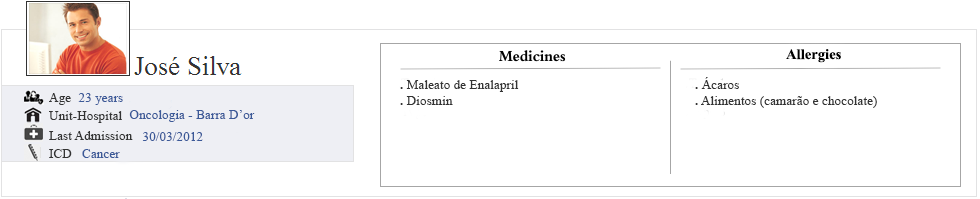
<style>
.page{position:relative;width:980px;height:199px;background:#ffffff}
.page>*{position:absolute;margin:0}
.t1{font:14.7px "TimesNewRomanPS-BoldMT";color:#000000}
.t2{font:13.3px "TimesNewRomanPSMT";color:#333333}
.t3{font:13.3px "TimesNewRomanPS-BoldMT";color:#333333}
.t4{font:13.3px "TimesNewRomanPSMT";color:#3b5998}
</style>
<div class="page">
<p class="t1" style="left:786px;top:49px;width:55px;height:14px">Allergies</p>
<p class="t2" style="left:695px;top:77px;width:182px;height:31px"><span class="t3">.</span> Ácaros<br><span class="t3">.</span> Alimentos (camarão e chocolate)</p>
<p class="t2" style="left:400px;top:80px;width:119px;height:25px"><span class="t3">.</span> Maleato de Enalapril<br><span class="t3">.</span> Diosmin</p>
<p class="t2" style="left:49px;top:93px;width:22px;height:12px">Age</p>
<p class="t4" style="left:78px;top:93px;width:45px;height:12px">23 years</p>
<p class="t2" style="left:49px;top:111px;width:73px;height:12px">Unit-Hospital</p>
<p class="t4" style="left:129px;top:110px;width:126px;height:12px">Oncologia - Barra D’or</p>
<p class="t2" style="left:49px;top:131px;width:84px;height:9px">Last Admission</p>
<p class="t4" style="left:142px;top:132px;width:61px;height:9px">30/03/2012</p>
<p class="t2" style="left:49px;top:149px;width:23px;height:9px">ICD</p>
<p class="t4" style="left:82px;top:149px;width:38px;height:9px">Cancer</p>
</div>
